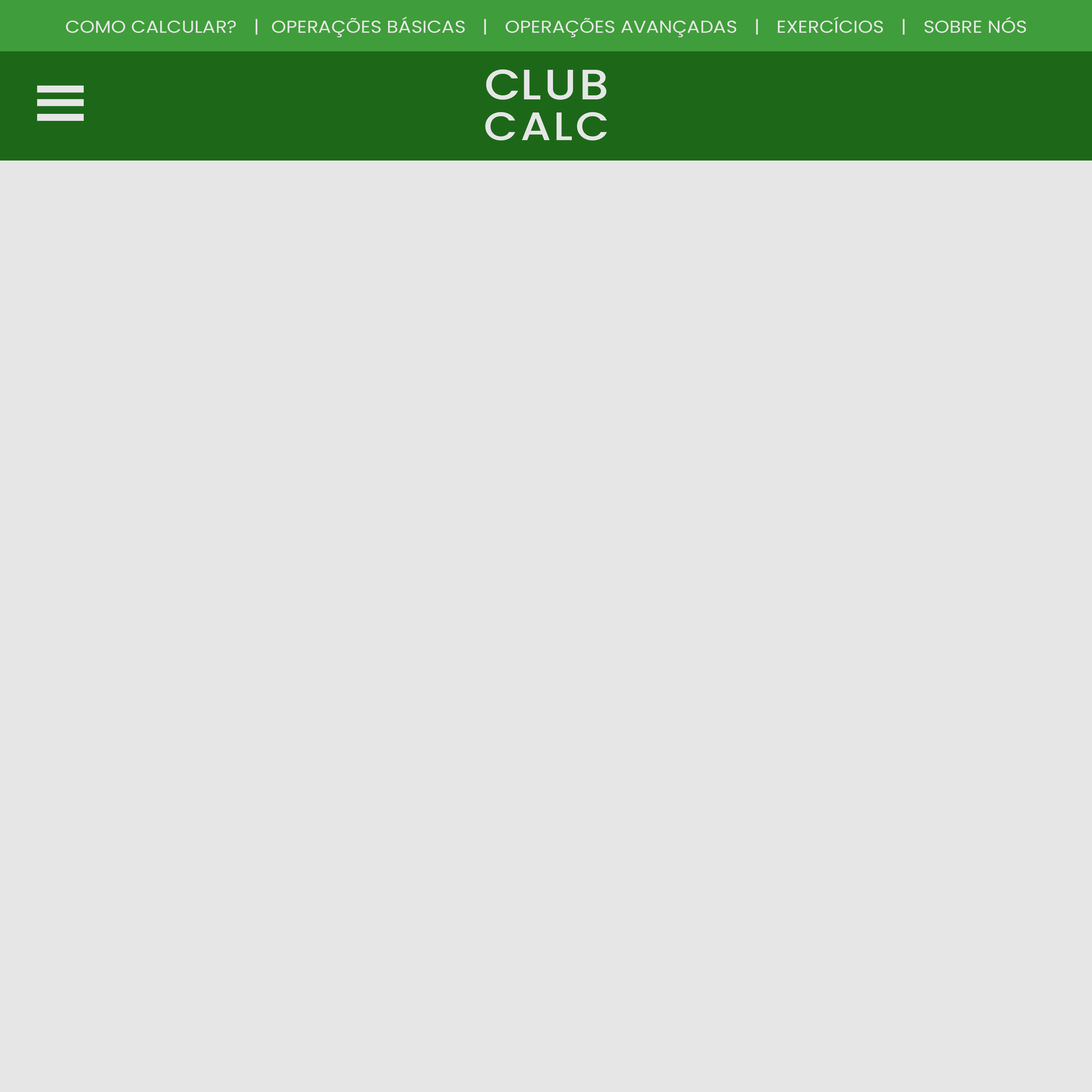
<style>
.page{position:relative;width:1092px;height:1092px;background:#e6e6e6}
.page>*{position:absolute;margin:0}
.t1{font:17.3px "Poppins-Regular";color:#e6e6e6;scale:1.1 1}
.t2{font:17.3px "Poppins-Regular";letter-spacing:0.62em;color:#e6e6e6;scale:1.1 1}
.t3{font:39.7px/40.5px "Poppins-Medium";letter-spacing:0.06em;color:#e6e6e6;scale:1.1 1}
.t4{font:42.5px/40.5px "Poppins-Medium";color:#e6e6e6;scale:1.1 1}
.t5{font:42.5px/40.5px "Poppins-Medium";letter-spacing:0.06em;color:#e6e6e6;scale:1.1 1}
</style>
<div class="page">
<p class="t1" style="left:66px;top:17px;width:960px;height:20px">COMO CALCULAR?<span class="t2"> |</span>OPERAÇÕES BÁSICAS | OPERAÇÕES AVANÇADAS | EXERCÍCIOS | SOBRE NÓS</p>
<p class="t3" style="left:485px;top:69px;width:122px;height:72px;text-align:center"><span class="t4">C</span><span class="t5">LUB<br></span>CALC</p>
</div>
